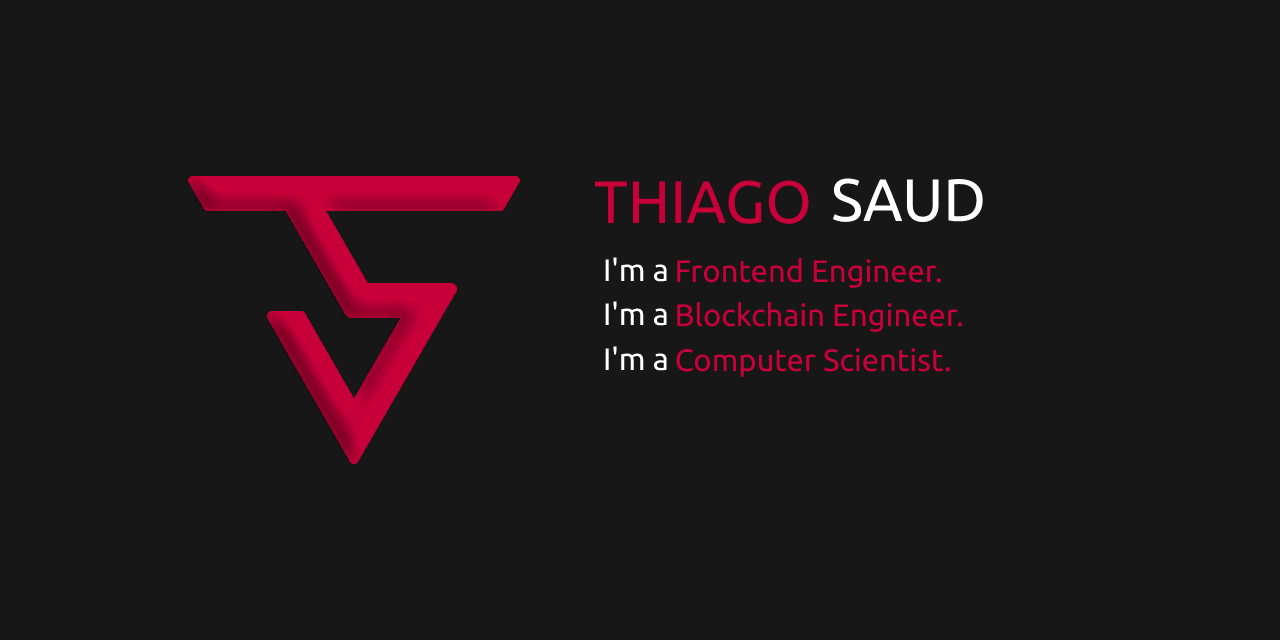
<style>
.page{position:relative;width:1280px;height:640px;background:#171717}
.page>*{position:absolute;margin:0}
.t1{font:60px "Ubuntu-Regular";color:#c70039}
.t2{font:60px "Ubuntu-Regular";color:#ffffff}
.t3{font:31px "Ubuntu-Regular";color:#ffffff}
.t4{font:31px "Ubuntu-Regular";color:#c70039}
</style>
<div class="page">
<p class="t1" style="left:594px;top:180px;width:215px;height:44px">THIAGO</p>
<p class="t2" style="left:832px;top:178px;width:151px;height:44px">SAUD</p>
<p class="t3" style="left:605px;top:257px;width:62px;height:25px">I'm a</p>
<p class="t4" style="left:677px;top:257px;width:264px;height:31px">Frontend Engineer.</p>
<p class="t3" style="left:605px;top:301px;width:62px;height:25px">I'm a</p>
<p class="t4" style="left:677px;top:301px;width:286px;height:31px">Blockchain Engineer.</p>
<p class="t3" style="left:605px;top:346px;width:62px;height:25px">I'm a</p>
<p class="t4" style="left:676px;top:348px;width:274px;height:29px">Computer Scientist.</p>
</div>
